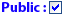
<style>
.page{position:relative;width:65px;height:15px;background:#ffffff}
.page>*{position:absolute;margin:0}
.t1{font:14px "MyriadPro-Bold";color:#1503fe}
</style>
<div class="page">
<p class="t1" style="left:2px;top:2px;width:44px;height:10px">Public :</p>
</div>
